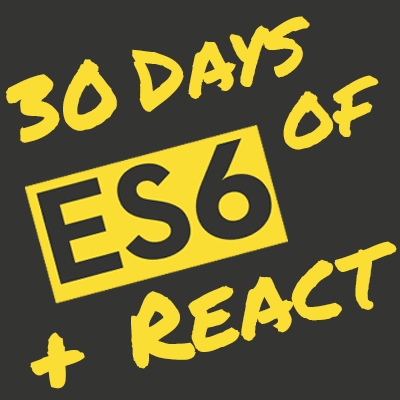
<style>
.page{position:relative;width:400px;height:400px;background:#343432}
.page>*{position:absolute;margin:0}
.t1{font:87.2px "PermanentMarker-Regular";color:#fade34}
.t2{font:97.6px "PermanentMarker-Regular";color:#fade34}
.t3{font:106.1px "PermanentMarker-Regular";color:#fade34}
</style>
<div class="page">
<p class="t1" style="left:5px;top:16px;width:305px;height:127px;rotate:-15deg">30Days</p>
<p class="t1" style="left:283px;top:75px;width:96px;height:75px;rotate:-15deg">of</p>
<p class="t2" style="left:30px;top:241px;width:367px;height:148px;rotate:-15deg"><span class="t3">+ </span>React</p>
</div>
